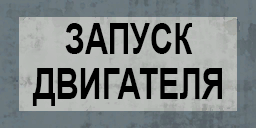
<style>
.page{position:relative;width:256px;height:128px}
.page>*{position:absolute;margin:0}
.t1{font:43px/45px "Arial-BoldMT";color:#000000;scale:0.74 1}
</style>
<div class="page">
<p class="t1" style="left:32px;top:23px;width:190px;height:83px;text-align:center">ЗАПУСК<br>ДВИГАТЕЛЯ</p>
</div>
